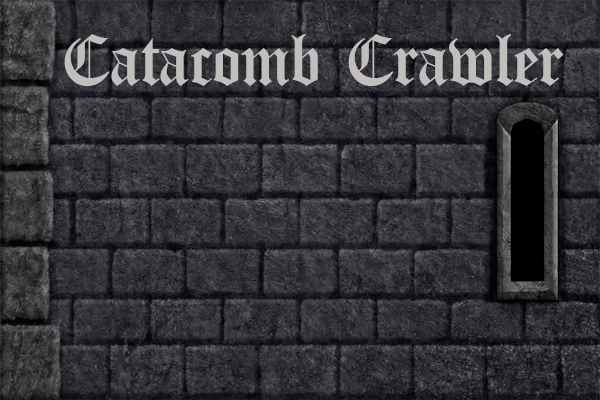
<style>
.page{position:relative;width:600px;height:400px}
.page>*{position:absolute;margin:0}
.t1{font:75px "Canterbury-Regular";color:#c2bebe}
</style>
<div class="page">
<p class="t1" style="left:64px;top:34px;width:500px;height:52px">Catacomb Crawler</p>
</div>
